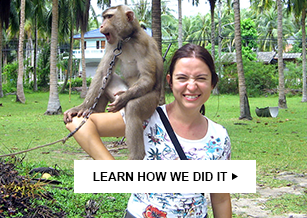
<style>
.page{position:relative;width:307px;height:218px}
.page>*{position:absolute;margin:0}
.t1{font:12px "Arial-BoldMT";color:#010101}
</style>
<div class="page">
<p class="t1" style="left:93px;top:172px;width:135px;height:9px">LEARN HOW WE DID IT</p>
</div>
